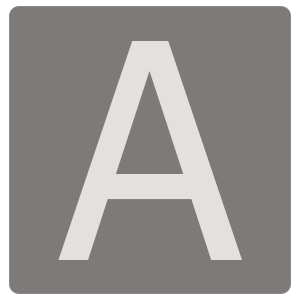
<style>
.page{position:relative;width:300px;height:300px;background:#7d7a79}
.page>*{position:absolute;margin:0}
.t1{font:72.2px "Tahoma";color:#e5e0e0}
</style>
<div class="page">
<p class="t1" style="left:58px;top:41px;width:184px;height:219px">A</p>
</div>
